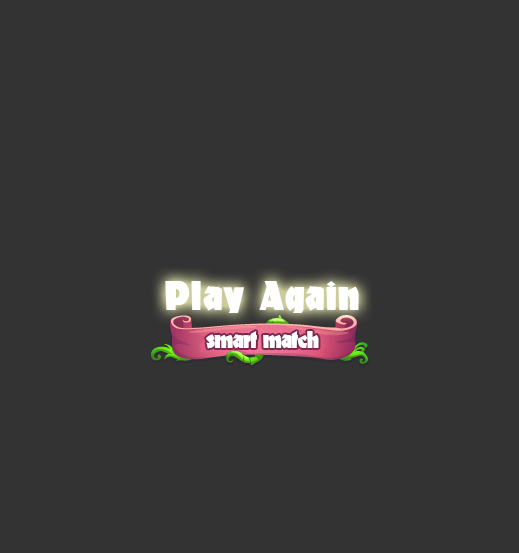
<style>
.page{position:relative;width:519px;height:553px;background:#333333}
.page>*{position:absolute;margin:0}
.t1{font:42px "Materhorn";letter-spacing:0.025em;color:#ffffff}
.t2{font:24px "Materhorn";letter-spacing:-0.025em;color:#ffffff}
</style>
<div class="page">
<p class="t1" style="left:165px;top:281px;width:194px;height:32px">Play Again</p>
<p class="t2" style="left:206px;top:331px;width:113px;height:18px">smart match</p>
</div>
